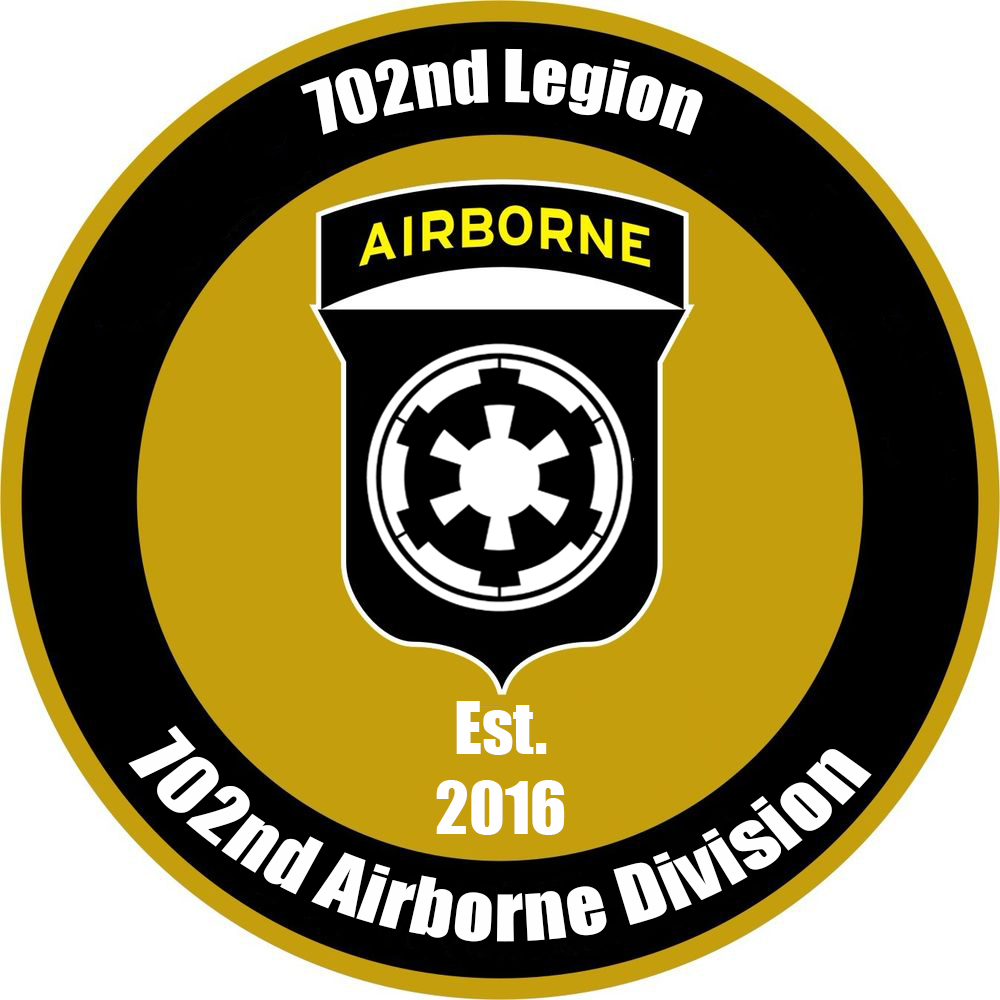
<style>
.page{position:relative;width:1000px;height:1000px;background:#000000}
.page>*{position:absolute;margin:0}
.t1{font:66.7px "Impact";color:#fefefe}
</style>
<div class="page">
<p class="t1" style="left:300px;top:48px;width:403px;height:87px">702nd Legion</p>
<p class="t1" style="left:436px;top:701px;width:129px;height:134px;text-align:center">Est.<br>2016</p>
<p class="t1" style="left:128px;top:725px;width:744px;height:217px;text-align:center">702nd Airborne Division</p>
</div>
